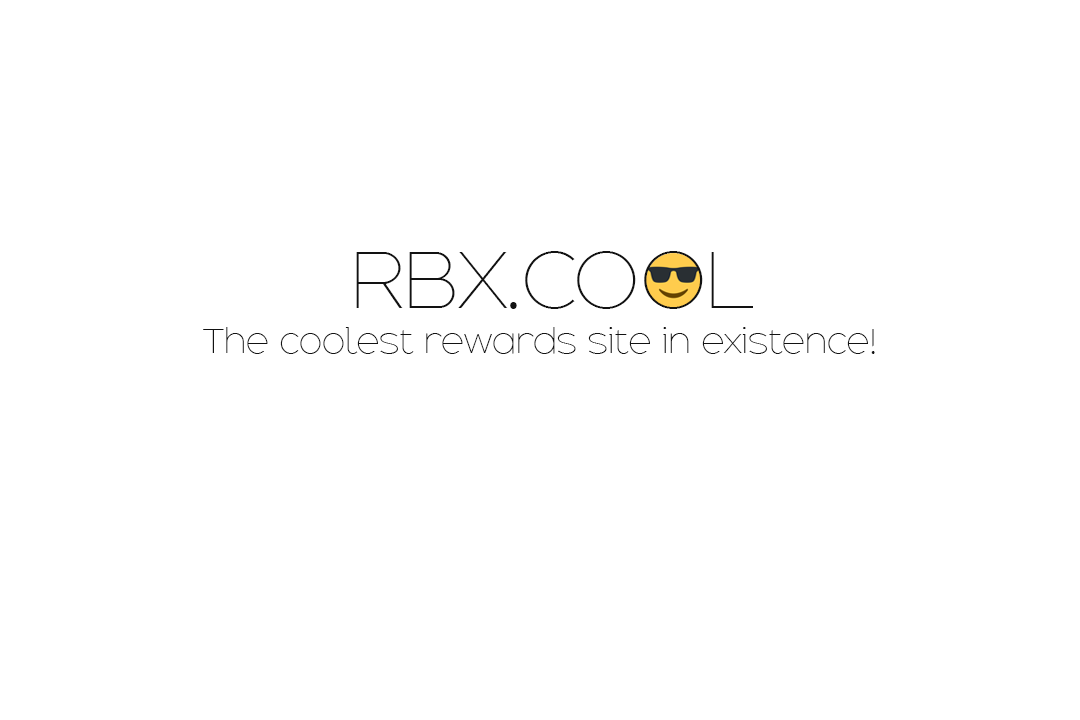
<style>
.page{position:relative;width:1080px;height:720px;background:#ffffff}
.page>*{position:absolute;margin:0}
.t1{font:70px "Adequate-ExtraLight";color:#121212}
.t2{font:30px "Adequate-ExtraLight";color:#121212}
</style>
<div class="page">
<p class="t1" style="left:356px;top:251px;width:397px;height:58px">RBX.COOL</p>
<p class="t2" style="left:203px;top:327px;width:672px;height:27px">The coolest rewards site in existence!</p>
</div>
